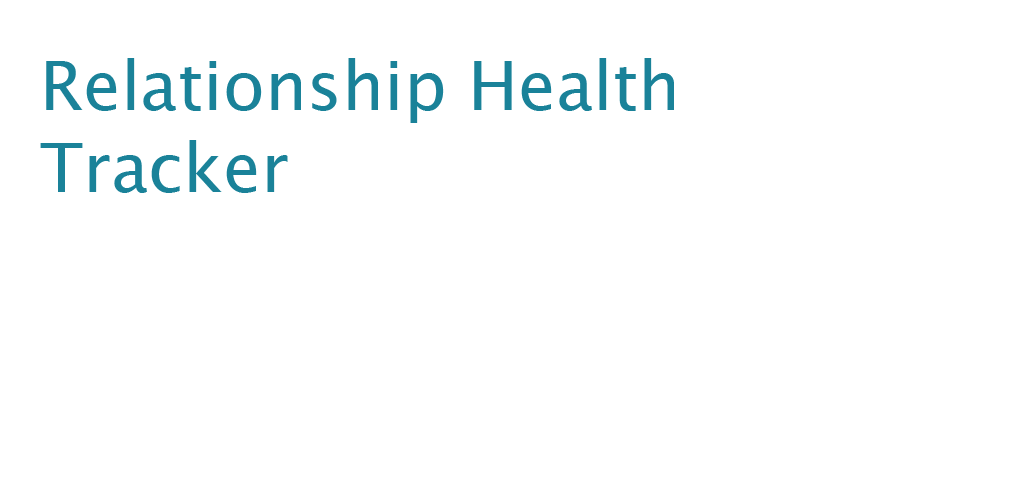
<style>
.page{position:relative;width:1024px;height:500px;background:#ffffff}
.page>*{position:absolute;margin:0}
.t1{font:68px "LucidaGrande";color:#1a8299}
</style>
<div class="page">
<p class="t1" style="left:40px;top:58px;width:634px;height:135px">Relationship Health<br>Tracker</p>
</div>
